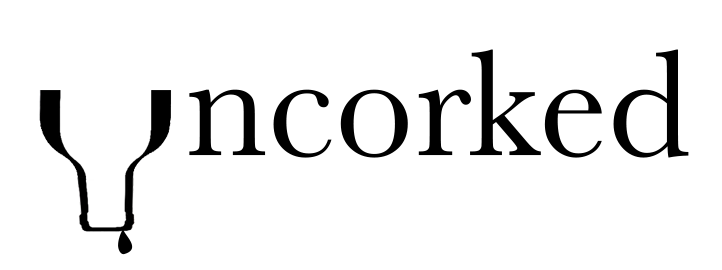
<style>
.page{position:relative;width:722px;height:270px;background:#ffffff}
.page>*{position:absolute;margin:0}
.t1{font:156.6px "Baskerville";color:#000000}
</style>
<div class="page">
<p class="t1" style="left:189px;top:49px;width:500px;height:109px">ncorked</p>
</div>
